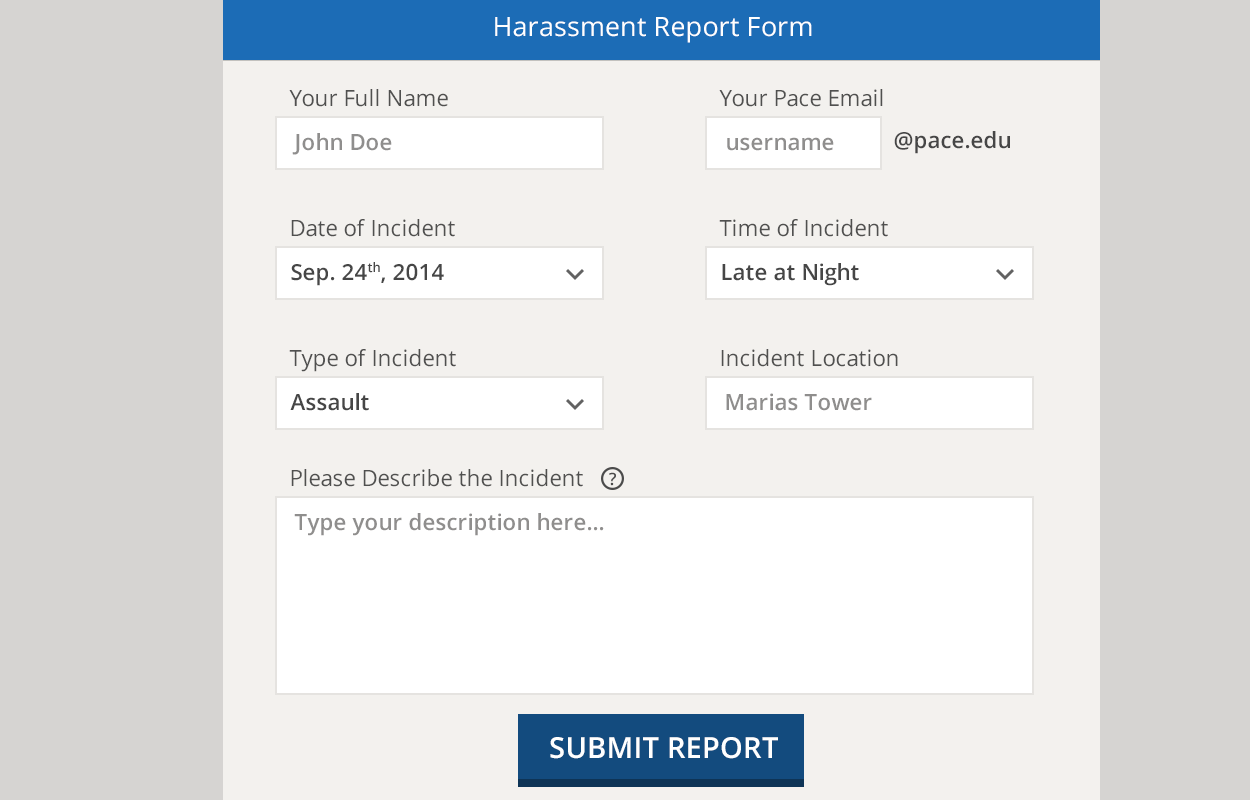
<style>
.page{position:relative;width:1250px;height:800px;background:#f3f1ee}
.page>*{position:absolute;margin:0}
.t1{font:26.7px "OpenSans";letter-spacing:0.01em;color:#ffffff}
.t2{font:22.2px "OpenSans";color:#50504f}
.t3{font:22.2px "OpenSans-Semibold";color:#8f8e8d}
.t4{font:22.2px "OpenSans-Semibold";color:#464646}
.t5{font:17px "OpenSans-Semibold";letter-spacing:0.01em;color:#4b4b4b}
.t6{font:28.9px "OpenSans-Semibold";letter-spacing:0.01em;color:#ffffff}
</style>
<div class="page">
<p class="t1" style="left:495px;top:17px;width:317px;height:26px">Harassment Report Form</p>
<p class="t2" style="left:289px;top:89px;width:159px;height:18px">Your Full Name</p>
<p class="t2" style="left:719px;top:89px;width:164px;height:18px">Your Pace Email</p>
<p class="t3" style="left:292px;top:133px;width:100px;height:22px">John Doe</p>
<p class="t3" style="left:727px;top:137px;width:107px;height:14px">username</p>
<p class="t4" style="left:894px;top:131px;width:116px;height:23px">@pace.edu</p>
<p class="t2" style="left:291px;top:219px;width:164px;height:18px">Date of Incident</p>
<p class="t2" style="left:719px;top:219px;width:169px;height:18px">Time of Incident</p>
<p class="t4" style="left:291px;top:262px;width:153px;height:24px">Sep. 24th, 2014</p>
<p class="t4" style="left:722px;top:263px;width:137px;height:23px">Late at Night</p>
<p class="t2" style="left:289px;top:349px;width:167px;height:23px">Type of Incident</p>
<p class="t2" style="left:721px;top:349px;width:177px;height:18px">Incident Location</p>
<p class="t4" style="left:290px;top:393px;width:79px;height:18px">Assault</p>
<p class="t3" style="left:726px;top:393px;width:146px;height:18px">Marias Tower</p>
<p class="t2" style="left:291px;top:469px;width:292px;height:18px">Please Describe the Incident</p>
<p class="t5" style="left:609px;top:472px;width:7px;height:14px">?</p>
<p class="t3" style="left:294px;top:513px;width:310px;height:23px">Type your description here...</p>
<p class="t6" style="left:550px;top:737px;width:228px;height:22px">SUBMIT REPORT</p>
</div>
